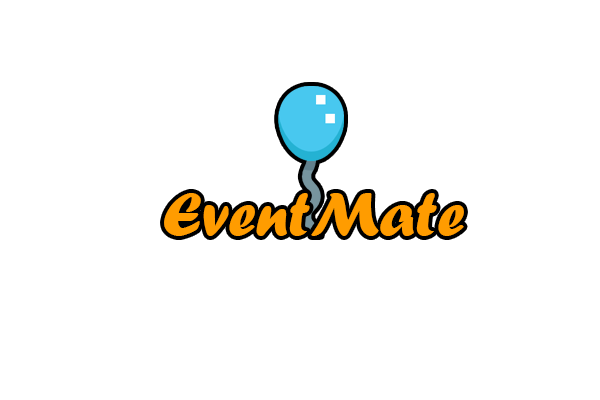
<style>
.page{position:relative;width:600px;height:400px;background:#ffffff}
.page>*{position:absolute;margin:0}
.t1{font:64px "ForteMT";color:#ff9c00}
</style>
<div class="page">
<p class="t1" style="left:164px;top:193px;width:300px;height:43px">EventMate</p>
</div>
